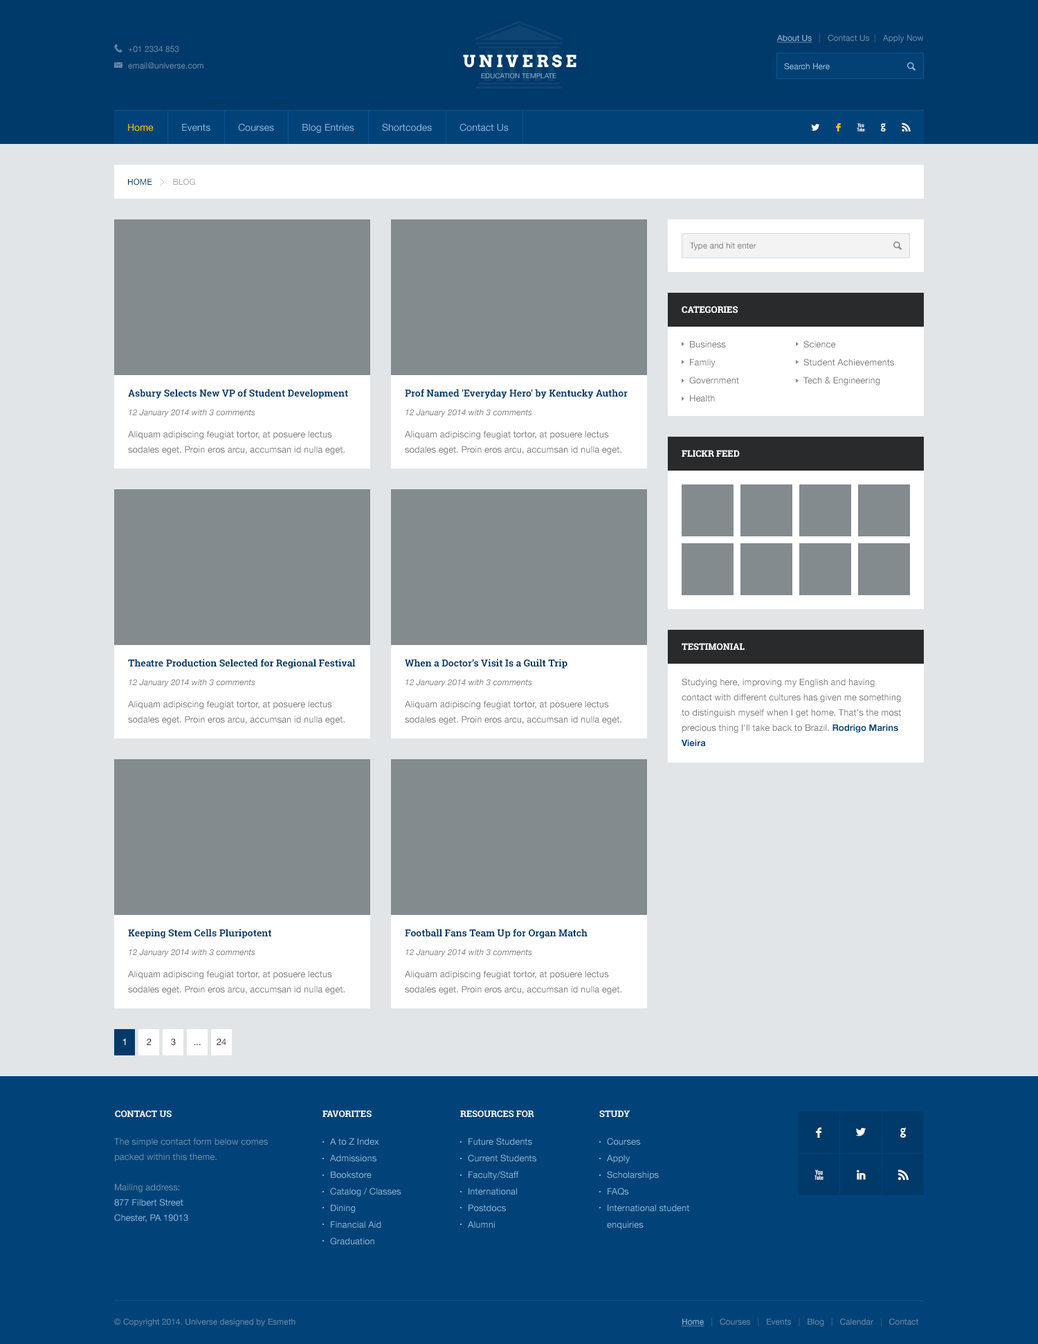
<style>
.page{position:relative;width:1038px;height:1344px;background:#e2e5e7}
.page>*{position:absolute;margin:0}
.t1{font:8.3px "HelveticaNeue";color:#6289a7}
.t2{font:8.3px "HelveticaNeue";color:#8ab5d6;text-decoration:underline}
.t3{font:8.3px "HelveticaNeue";color:#44647c}
.t4{font:16.6px "Arvo-Bold";letter-spacing:0.2em;color:#ffffff}
.t5{font:8.3px "HelveticaNeue";color:#8ab5d6}
.t6{font:6.9px "HelveticaNeue";color:#8ab5d6}
.t7{font:9.7px "HelveticaNeue";color:#fecd0b}
.t8{font:9.7px "HelveticaNeue";color:#8ab5d6}
.t9{font:13.8px "Socialico";letter-spacing:1.1em;color:#ffffff}
.t10{font:13.8px "Socialico";letter-spacing:1.1em;color:#fecd0b}
.t11{font:8.3px "HelveticaNeue";color:#003a6a}
.t12{font:8.3px "HelveticaNeue";color:#aaaaaa}
.t13{font:8.3px "HelveticaNeue";color:#808080}
.t14{font:9px "RobotoSlab-Bold";color:#ffffff;text-transform:uppercase}
.t15{font:9px/18px "HelveticaNeue";color:#808080}
.t16{font:9.7px "RobotoSlab-Bold";color:#003a6a}
.t17{font:8.3px "HelveticaNeue-Italic";color:#808080}
.t18{font:9px/15.2px "HelveticaNeue";color:#808080}
.t19{font:9px/15.2px "HelveticaNeue-Bold";color:#014379}
.t20{font:9px "HelveticaNeue";color:#ffffff}
.t21{font:9px "HelveticaNeue";color:#282a2c}
.t22{font:16.6px "Socialico";color:#ffffff;text-transform:uppercase}
.t23{font:9px/15.2px "HelveticaNeue";color:#6b90ad}
.t24{font:9px/15.2px "HelveticaNeue";color:#8ab5d6}
.t25{font:9px/16.6px "HelveticaNeue";color:#8ab5d6}
</style>
<div class="page">
<p class="t1" style="left:777px;top:34px;width:147px;height:9px"><span class="t2">About Us  </span><span class="t3"> |   </span>Contact Us <span class="t3"> | </span>  Apply Now</p>
<p class="t1" style="left:128px;top:46px;width:51px;height:7px">+01 2334 853</p>
<p class="t1" style="left:128px;top:62px;width:76px;height:7px">email@universe.com</p>
<p class="t4" style="left:463px;top:55px;width:114px;height:13px">UNIVERSE</p>
<p class="t5" style="left:784px;top:63px;width:46px;height:7px">Search Here</p>
<p class="t6" style="left:481px;top:73px;width:76px;height:6px">EDUCATION TEMPLATE</p>
<p class="t7" style="left:128px;top:124px;width:26px;height:8px">Home</p>
<p class="t8" style="left:182px;top:124px;width:28px;height:8px">Events</p>
<p class="t8" style="left:238px;top:123px;width:36px;height:9px">Courses</p>
<p class="t8" style="left:303px;top:124px;width:51px;height:9px">Blog Entries</p>
<p class="t8" style="left:382px;top:123px;width:50px;height:9px">Shortcodes</p>
<p class="t8" style="left:460px;top:123px;width:49px;height:9px">Contact Us</p>
<p class="t9" style="left:811px;top:123px;width:100px;height:9px">L<span class="t10">F</span>XGR</p>
<p class="t11" style="left:128px;top:179px;width:67px;height:7px">HOME         <span class="t12">BLOG</span></p>
<p class="t13" style="left:690px;top:242px;width:67px;height:9px">Type and hit enter</p>
<p class="t14" style="left:682px;top:306px;width:56px;height:8px">categories</p>
<p class="t15" style="left:690px;top:341px;width:49px;height:61px">Business<br>Famliy<br>Government<br>Health</p>
<p class="t15" style="left:804px;top:341px;width:90px;height:45px">Science<br>Student Achievements<br>Tech &amp; Engineering</p>
<p class="t16" style="left:128px;top:389px;width:220px;height:10px">Asbury Selects New VP of Student Development</p>
<p class="t16" style="left:405px;top:389px;width:223px;height:10px">Prof Named 'Everyday Hero' by Kentucky Author</p>
<p class="t17" style="left:129px;top:409px;width:126px;height:8px">12 January 2014 with 3 comments</p>
<p class="t17" style="left:406px;top:409px;width:126px;height:8px">12 January 2014 with 3 comments</p>
<p class="t18" style="left:128px;top:431px;width:217px;height:24px">Aliquam adipiscing feugiat tortor, at posuere lectus sodales eget. Proin eros arcu, accumsan id nulla eget.</p>
<p class="t18" style="left:405px;top:431px;width:217px;height:24px">Aliquam adipiscing feugiat tortor, at posuere lectus sodales eget. Proin eros arcu, accumsan id nulla eget.</p>
<p class="t14" style="left:682px;top:450px;width:58px;height:8px">flickr feed</p>
<p class="t14" style="left:682px;top:643px;width:63px;height:8px">Testimonial</p>
<p class="t16" style="left:128px;top:659px;width:228px;height:10px">Theatre Production Selected for Regional Festival</p>
<p class="t16" style="left:405px;top:659px;width:163px;height:10px">When a Doctor’s Visit Is a Guilt Trip</p>
<p class="t17" style="left:129px;top:679px;width:126px;height:8px">12 January 2014 with 3 comments</p>
<p class="t17" style="left:406px;top:679px;width:126px;height:8px">12 January 2014 with 3 comments</p>
<p class="t18" style="left:682px;top:678px;width:219px;height:69px">Studying here, improving my English and having contact with different cultures has given me something to distinguish myself when I get home. That's the most precious thing I'll take back to Brazil. <span class="t19">Rodrigo Marins Vieira</span></p>
<p class="t18" style="left:128px;top:701px;width:217px;height:24px">Aliquam adipiscing feugiat tortor, at posuere lectus sodales eget. Proin eros arcu, accumsan id nulla eget.</p>
<p class="t18" style="left:405px;top:701px;width:217px;height:24px">Aliquam adipiscing feugiat tortor, at posuere lectus sodales eget. Proin eros arcu, accumsan id nulla eget.</p>
<p class="t16" style="left:128px;top:929px;width:144px;height:10px">Keeping Stem Cells Pluripotent</p>
<p class="t16" style="left:405px;top:929px;width:183px;height:10px">Football Fans Team Up for Organ Match</p>
<p class="t17" style="left:129px;top:949px;width:126px;height:8px">12 January 2014 with 3 comments</p>
<p class="t17" style="left:406px;top:949px;width:126px;height:8px">12 January 2014 with 3 comments</p>
<p class="t18" style="left:128px;top:971px;width:217px;height:24px">Aliquam adipiscing feugiat tortor, at posuere lectus sodales eget. Proin eros arcu, accumsan id nulla eget.</p>
<p class="t18" style="left:405px;top:971px;width:217px;height:24px">Aliquam adipiscing feugiat tortor, at posuere lectus sodales eget. Proin eros arcu, accumsan id nulla eget.</p>
<p class="t20" style="left:123px;top:1038px;width:3px;height:7px">1</p>
<p class="t21" style="left:147px;top:1038px;width:5px;height:7px">2</p>
<p class="t21" style="left:171px;top:1038px;width:5px;height:8px">3</p>
<p class="t21" style="left:194px;top:1044px;width:7px;height:1px">...</p>
<p class="t21" style="left:217px;top:1038px;width:9px;height:7px">24</p>
<p class="t14" style="left:115px;top:1110px;width:57px;height:8px">Contact us</p>
<p class="t14" style="left:323px;top:1110px;width:49px;height:8px">favorites</p>
<p class="t14" style="left:460px;top:1110px;width:74px;height:8px">resources for</p>
<p class="t14" style="left:600px;top:1110px;width:30px;height:8px">STUDY</p>
<p class="t22" style="left:816px;top:1128px;width:6px;height:10px">F</p>
<p class="t22" style="left:856px;top:1128px;width:10px;height:9px">L</p>
<p class="t22" style="left:901px;top:1128px;width:5px;height:10px">G</p>
<p class="t23" style="left:114px;top:1138px;width:154px;height:85px">The simple contact form below comes packed within this theme. <br><br>Mailing address:<br><span class="t24">877 Filbert Street<br>Chester, PA 19013</span></p>
<p class="t25" style="left:330px;top:1138px;width:72px;height:107px">A to Z Index<br>Admissions<br>Bookstore<br>Catalog / Classes<br>Dining<br>Financial Aid<br>Graduation</p>
<p class="t25" style="left:468px;top:1138px;width:69px;height:91px">Future Students<br>Current Students<br>Faculty/Staff<br>International<br>Postdocs<br>Alumni</p>
<p class="t25" style="left:607px;top:1138px;width:83px;height:92px">Courses<br>Apply<br>Scholarships<br>FAQs<br>International student enquiries</p>
<p class="t22" style="left:815px;top:1170px;width:9px;height:10px">X</p>
<p class="t22" style="left:857px;top:1170px;width:9px;height:10px">I</p>
<p class="t22" style="left:899px;top:1170px;width:10px;height:10px">R</p>
<p class="t1" style="left:114px;top:1319px;width:182px;height:8px">© Copyright 2014. Universe designed by Esmeth</p>
<p class="t1" style="left:682px;top:1318px;width:237px;height:9px"><span class="t2">Home  </span><span class="t3"> |   </span>Courses  <span class="t3"> | </span>  Events  <span class="t3"> | </span>  Blog  <span class="t3"> | </span>  Calendar  <span class="t3"> | </span>  Contact</p>
</div>
